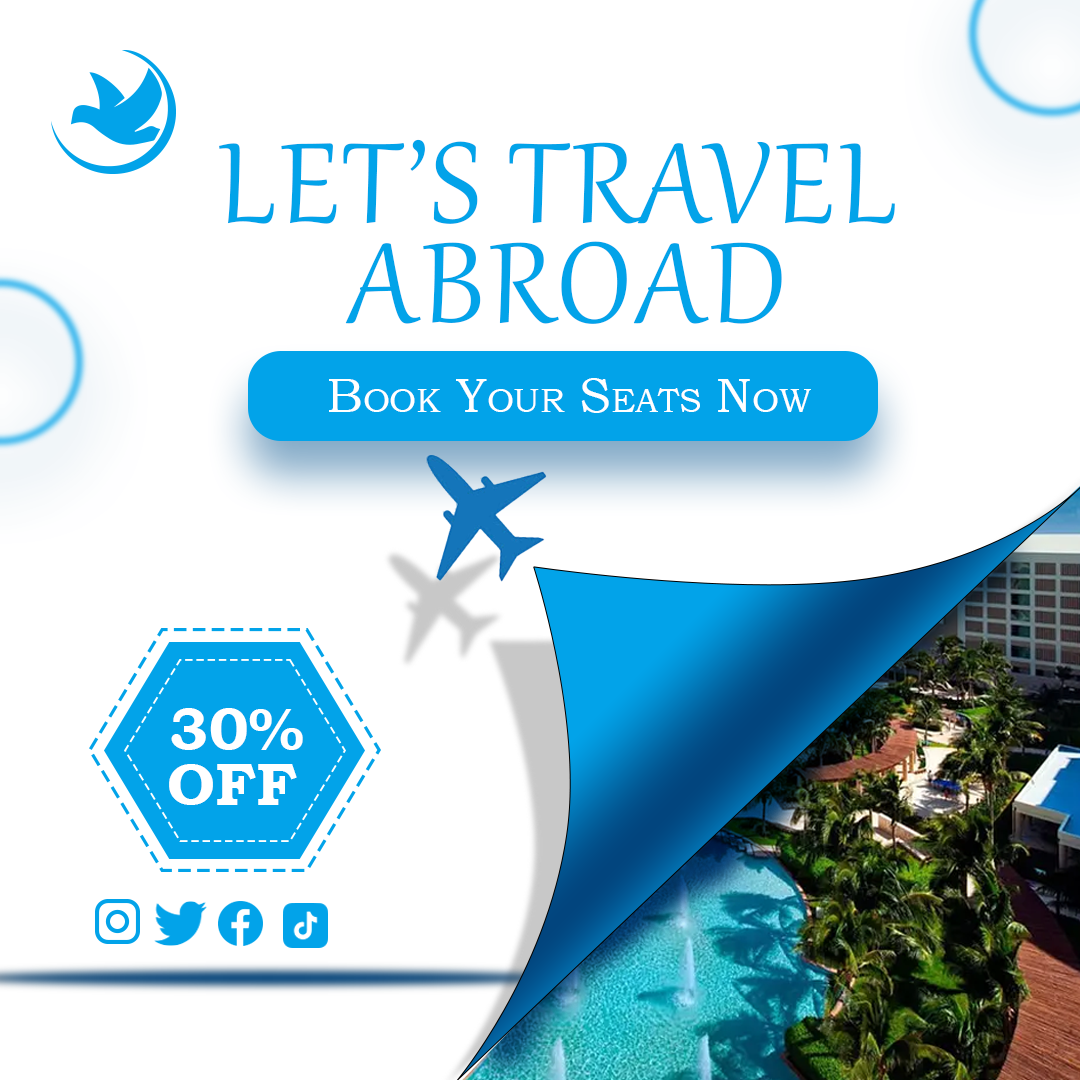
<style>
.page{position:relative;width:1080px;height:1080px;background:#ffffff}
.page>*{position:absolute;margin:0}
.t1{font:140px "Gabriola";color:#02a3e9;text-transform:uppercase}
.t2{font:48px "BookmanOldStyle";color:#ffffff;font-variant:small-caps}
.t3{font:60px "BookmanOldStyle-Bold";color:#ffffff;text-transform:uppercase}
</style>
<div class="page">
<p class="t1" style="left:219px;top:139px;width:676px;height:85px">Let’s Travel</p>
<p class="t1" style="left:345px;top:241px;width:437px;height:83px">Abroad</p>
<p class="t2" style="left:329px;top:378px;width:482px;height:35px">Book Your Seats Now</p>
<p class="t3" style="left:171px;top:708px;width:132px;height:42px">30%</p>
<p class="t3" style="left:169px;top:764px;width:128px;height:41px">OFF</p>
</div>
